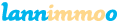
<style>
.page{position:relative;width:117px;height:23px;background:#ffffff}
.page>*{position:absolute;margin:0}
.t1{font:29px "BlackRose";color:#00b5ec}
.t2{font:29px "BlackRose";color:#fed78b}
</style>
<div class="page">
<p class="t1" style="left:1px;top:2px;width:116px;height:19px">lann<span class="t2">immo</span>o</p>
</div>
